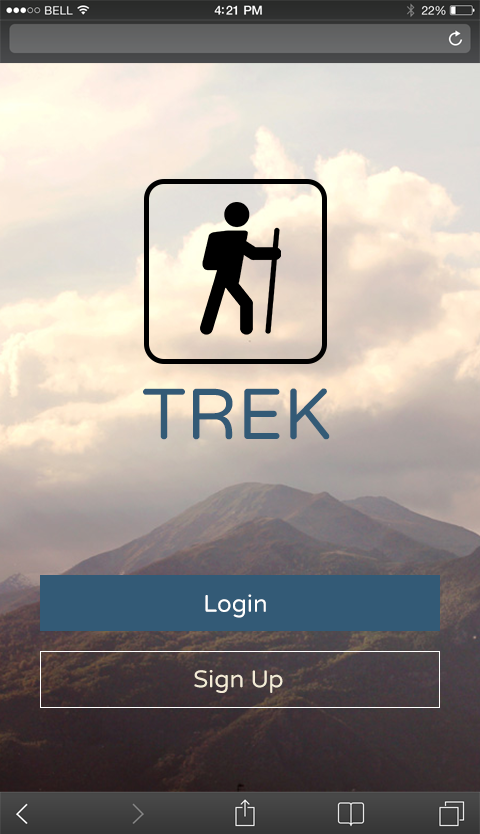
<style>
.page{position:relative;width:480px;height:834px}
.page>*{position:absolute;margin:0}
.t1{font:72px "VarelaRound-Regular";color:#335a76;text-transform:uppercase}
.t2{font:24px "VarelaRound-Regular";color:#ffffff}
.t3{font:24px "VarelaRound-Regular";color:#f4ecd7}
</style>
<div class="page">
<p class="t1" style="left:143px;top:388px;width:187px;height:52px">TREK</p>
<p class="t2" style="left:205px;top:594px;width:61px;height:24px">Login</p>
<p class="t3" style="left:194px;top:670px;width:89px;height:23px">Sign Up</p>
</div>
